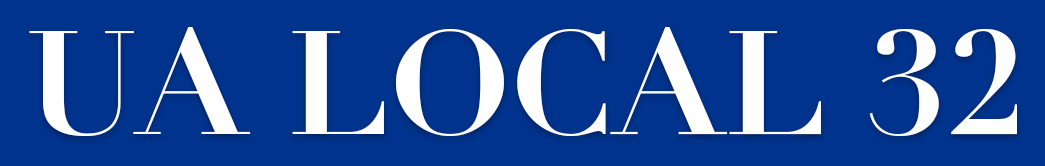
<style>
.page{position:relative;width:1045px;height:166px;background:#00338d}
.page>*{position:absolute;margin:0}
.t1{font:144px "Didot-Bold";color:#ffffff}
</style>
<div class="page">
<p class="t1" style="left:29px;top:27px;width:988px;height:109px">UA LOCAL 32</p>
</div>
